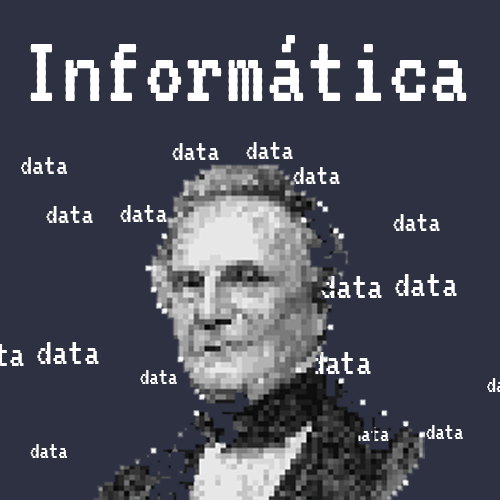
<style>
.page{position:relative;width:500px;height:500px;background:#2d3142}
.page>*{position:absolute;margin:0}
.t1{font:102px "VT323-Regular";color:#ffffff}
.t2{font:30px "VT323-Regular";color:#ffffff}
.t3{font:39.5px "VT323-Regular";color:#ffffff}
.t4{font:23.6px "VT323-Regular";color:#ffffff}
</style>
<div class="page">
<p class="t1" style="left:30px;top:35px;width:437px;height:66px">Informática</p>
<p class="t2" style="left:172px;top:143px;width:47px;height:17px">data</p>
<p class="t2" style="left:246px;top:142px;width:47px;height:17px">data</p>
<p class="t2" style="left:21px;top:157px;width:46px;height:17px">data</p>
<p class="t2" style="left:293px;top:167px;width:47px;height:17px">data</p>
<p class="t2" style="left:46px;top:206px;width:47px;height:17px">data</p>
<p class="t2" style="left:120px;top:205px;width:47px;height:17px">data</p>
<p class="t2" style="left:393px;top:214px;width:47px;height:17px">data</p>
<p class="t3" style="left:321px;top:276px;width:61px;height:22px">data</p>
<p class="t3" style="left:395px;top:274px;width:62px;height:22px">data</p>
<p class="t3" style="left:37px;top:342px;width:62px;height:22px">data</p>
<p class="t3" style="left:310px;top:352px;width:61px;height:22px">data</p>
<p class="t4" style="left:140px;top:370px;width:37px;height:14px">data</p>
<p class="t4" style="left:426px;top:425px;width:37px;height:14px">data</p>
<p class="t4" style="left:352px;top:427px;width:37px;height:14px">data</p>
<p class="t4" style="left:30px;top:444px;width:37px;height:14px">data</p>
</div>
